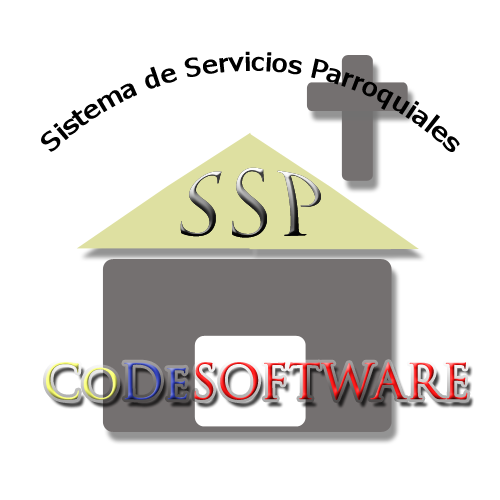
<style>
.page{position:relative;width:500px;height:500px;background:#ffffff}
.page>*{position:absolute;margin:0}
.t1{font:26px "Tahoma";color:#000000}
.t2{font:72px "TrajanPro-Regular"}
.t3{font:48px "TrajanPro-Regular"}
</style>
<div class="page">
<p class="t1" style="left:41px;top:51px;width:419px;height:101px">Sistema de Servicios Parroquiales</p>
<p class="t2" style="left:180px;top:167px;width:141px;height:71px">SSP</p>
<p class="t3" style="left:46px;top:362px;width:422px;height:38px">CoDeSOFTWARE</p>
</div>
